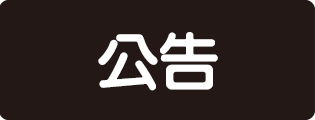
<style>
.page{position:relative;width:315px;height:120px;background:#231816}
.page>*{position:absolute;margin:0}
.t1{font:60.9px "HanWangYenHeavy";color:#ffffff}
</style>
<div class="page">
<p class="t1" style="left:98px;top:32px;width:120px;height:59px">公告</p>
</div>
